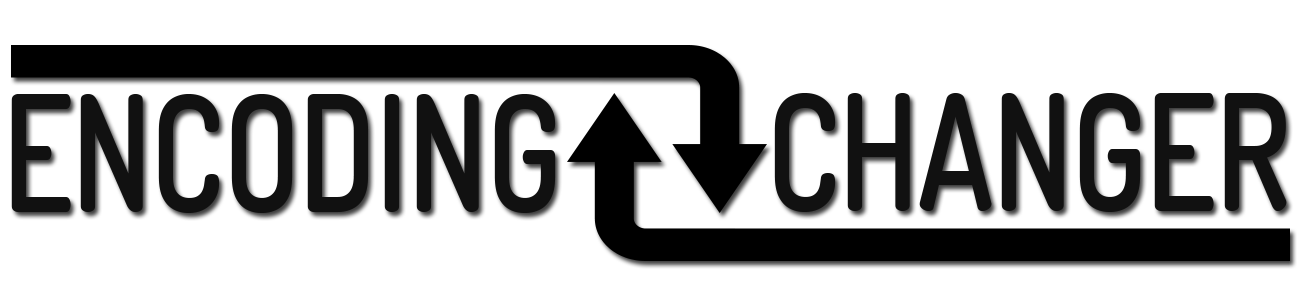
<style>
.page{position:relative;width:1300px;height:300px;background:#ffffff}
.page>*{position:absolute;margin:0}
.t1{font:160.5px "Dosis-SemiBold";color:#111111;scale:0.83 1}
</style>
<div class="page">
<p class="t1" style="left:11px;top:94px;width:545px;height:119px">ENCODING</p>
<p class="t1" style="left:774px;top:93px;width:513px;height:119px">CHANGER</p>
</div>
